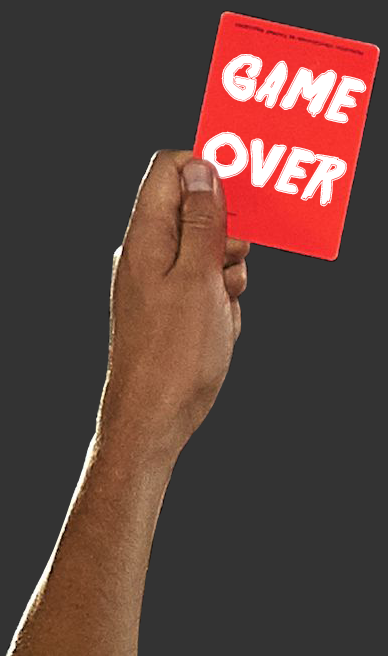
<style>
.page{position:relative;width:388px;height:656px;background:#333333}
.page>*{position:absolute;margin:0}
.t1{font:67px "Friday13BonusNFI";letter-spacing:0.06em;color:#ffffff}
.t2{font:67px "Friday13BonusNFI";letter-spacing:0.02em;color:#ffffff}
</style>
<div class="page">
<p class="t1" style="left:202px;top:54px;width:165px;height:153px;rotate:13deg">game <span class="t2">over</span></p>
</div>
